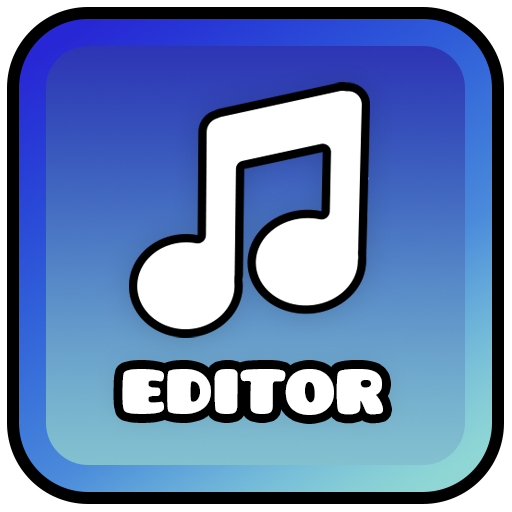
<style>
.page{position:relative;width:512px;height:512px;background:#ffffff}
.page>*{position:absolute;margin:0}
.t1{font:80px "Pusab";color:#ffffff}
</style>
<div class="page">
<p class="t1" style="left:122px;top:369px;width:261px;height:46px">editor</p>
</div>
